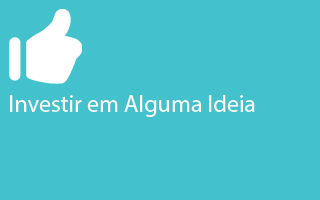
<style>
.page{position:relative;width:320px;height:200px;background:#43c1cc}
.page>*{position:absolute;margin:0}
.t1{font:24px "MyriadPro-Regular";color:#fcfaf8}
</style>
<div class="page">
<p class="t1" style="left:10px;top:95px;width:245px;height:22px">Investir em Alguma Ideia</p>
</div>
